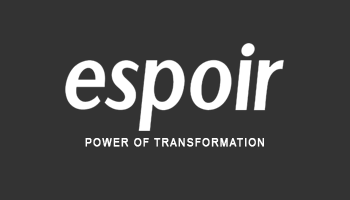
<style>
.page{position:relative;width:350px;height:200px;background:#333333}
.page>*{position:absolute;margin:0}
.t1{font:11px "ArialMT";letter-spacing:0.1em;color:#ffffff;text-transform:uppercase;font-weight:bold;scale:0.92 1}
</style>
<div class="page">
<p class="t1" style="left:85px;top:138px;width:179px;height:9px">power of transformation</p>
</div>
